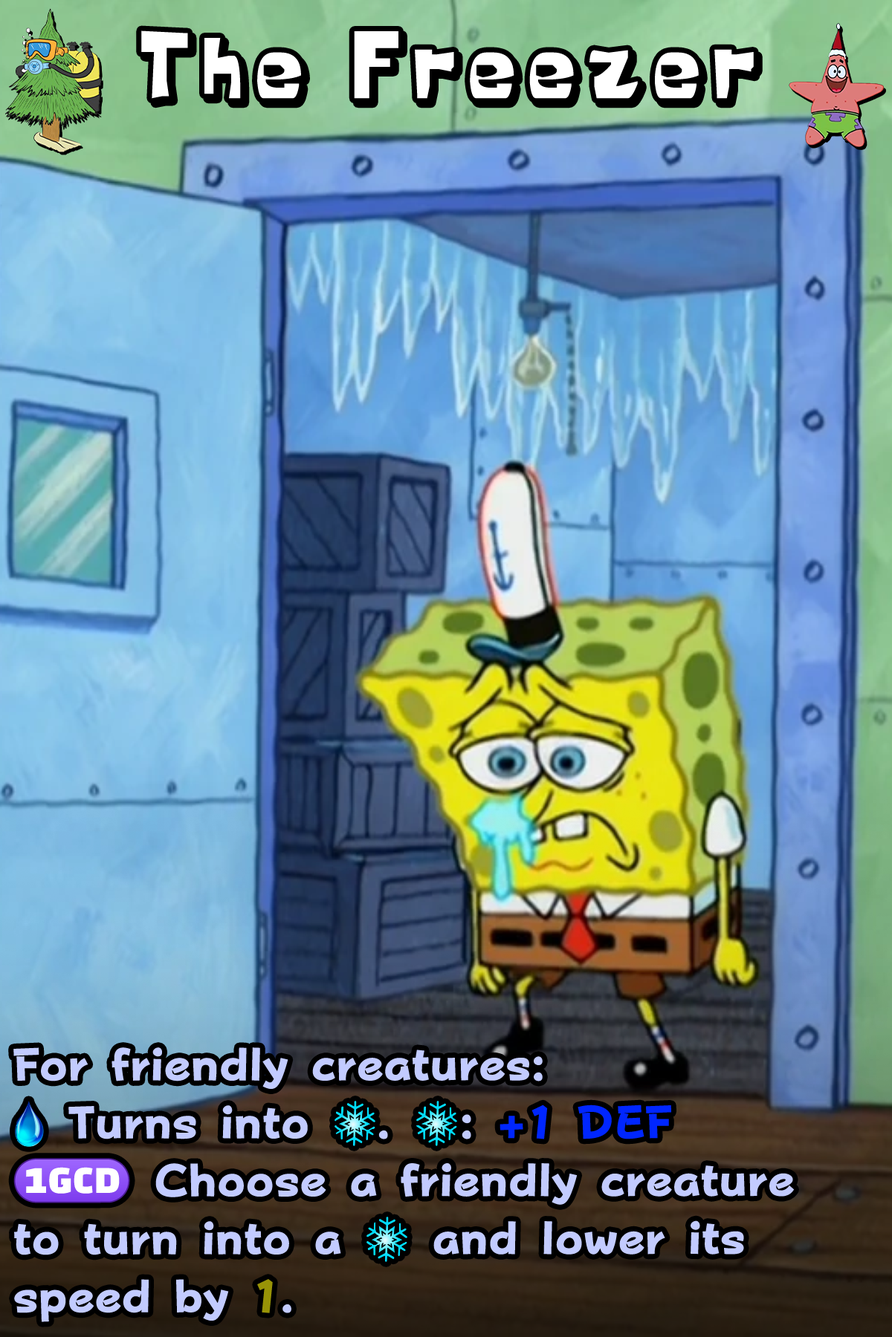
<style>
.page{position:relative;width:892px;height:1337px}
.page>*{position:absolute;margin:0}
.t1{font:153.6px "KrabbyPatty";letter-spacing:0.14em;color:#ffffff}
.t2{font:78.3px/58px "FOTPopHappinessStrp-ExtraBold";color:#c2cbff}
.t3{font:78.3px/58px "stoogedings-Regular";color:#c2cbff}
.t4{font:78.3px/58px "FOTPopHappinessStrp-ExtraBold";color:#0026ff}
.t5{font:78.3px/58px "FOTPopHappinessStrp-ExtraBold";color:#989307}
</style>
<div class="page">
<p class="t1" style="left:141px;top:30px;width:612px;height:69px">The Freezer</p>
<p class="t2" style="left:13px;top:1048px;width:781px;height:275px">For friendly creatures:<br><span class="t3">[water]</span> Turns into <span class="t3">[ice]</span>. <span class="t3">[ice]</span>: <span class="t4">+1 DEF<br></span><span class="t3">(1GCD)</span> Choose a friendly creature to turn into a <span class="t3">[ice]</span> and lower its speed by <span class="t5">1</span>.</p>
</div>
